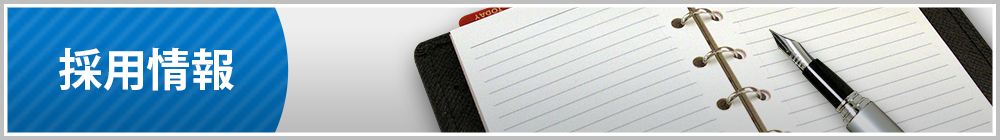
<style>
.page{position:relative;width:1000px;height:140px}
.page>*{position:absolute;margin:0}
.t1{font:44.4px "KozGoPro-Bold";color:#ffffff}
</style>
<div class="page">
<p class="t1" style="left:59px;top:47px;width:175px;height:44px">採用情報</p>
</div>
